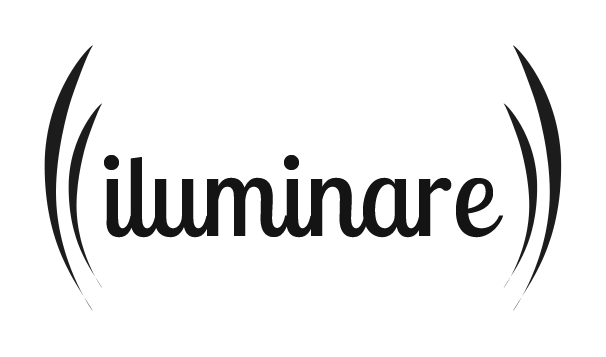
<style>
.page{position:relative;width:606px;height:357px;background:#ffffff}
.page>*{position:absolute;margin:0}
.t1{font:113.6px "LobsterTwo";color:#141414}
</style>
<div class="page">
<p class="t1" style="left:104px;top:155px;width:399px;height:83px">iluminare</p>
</div>
